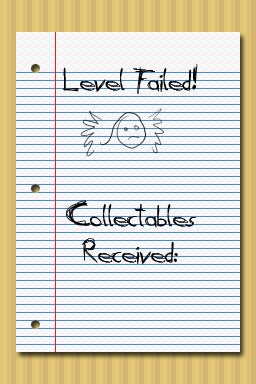
<style>
.page{position:relative;width:256px;height:384px}
.page>*{position:absolute;margin:0}
.t1{font:30px "Daubed";color:#000000}
</style>
<div class="page">
<p class="t1" style="left:62px;top:64px;width:136px;height:30px">Level Failed!</p>
<p class="t1" style="left:66px;top:200px;width:131px;height:64px;text-align:center">Collectables<br>Received:</p>
</div>
